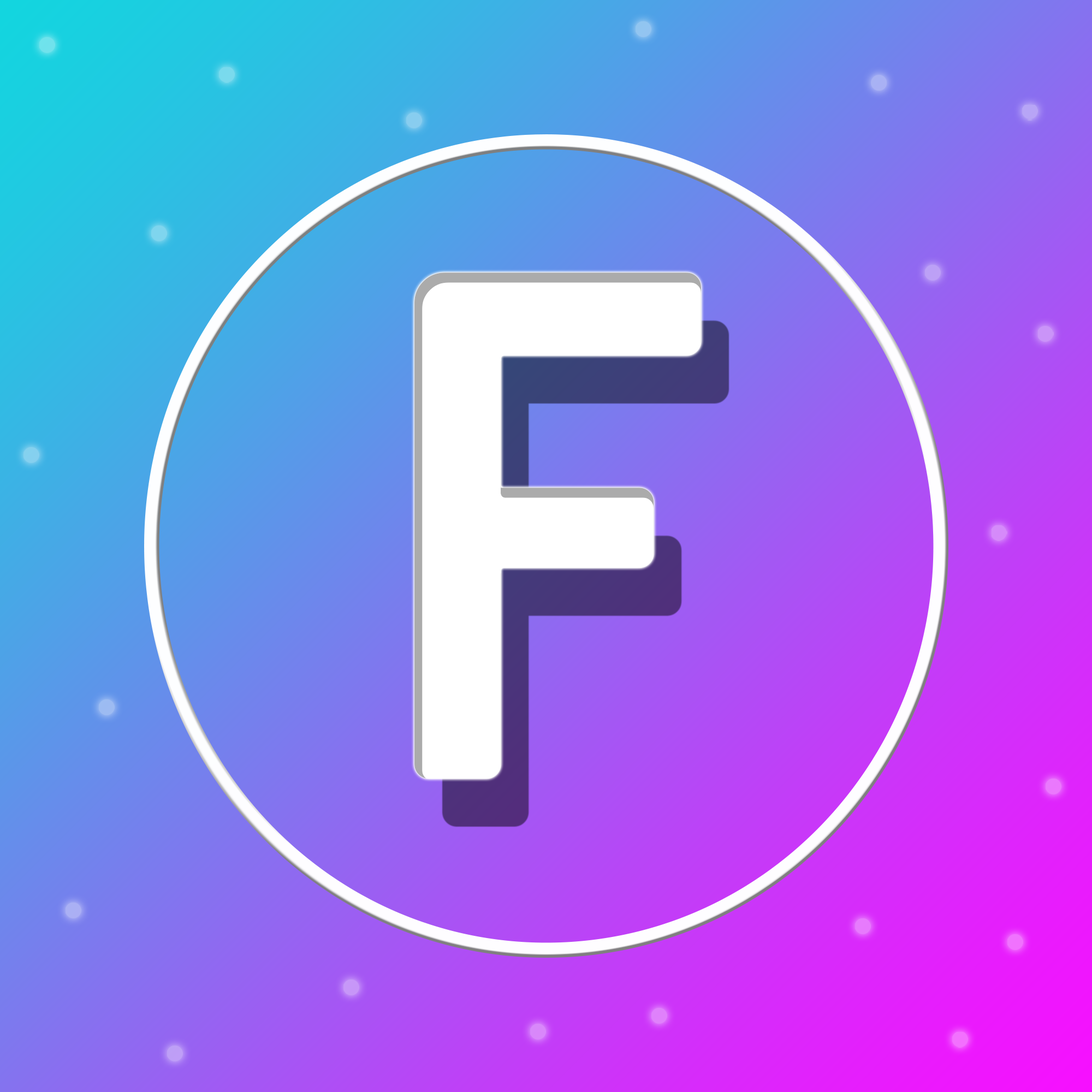
<style>
.page{position:relative;width:1092px;height:1092px}
.page>*{position:absolute;margin:0}
.t1{font:707.6px "MiriamLibre-Bold";color:#ffffff}
</style>
<div class="page">
<p class="t1" style="left:414px;top:272px;width:287px;height:507px">F</p>
</div>
